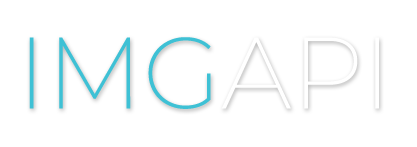
<style>
.page{position:relative;width:417px;height:147px;background:#ffffff}
.page>*{position:absolute;margin:0}
.t1{font:101.1px "Montserrat-Thin";color:#3ec1d5}
.t2{font:101.1px "Montserrat-Thin";color:#ffffff}
</style>
<div class="page">
<p class="t1" style="left:29px;top:37px;width:350px;height:72px">IMG<span class="t2">API</span></p>
</div>
